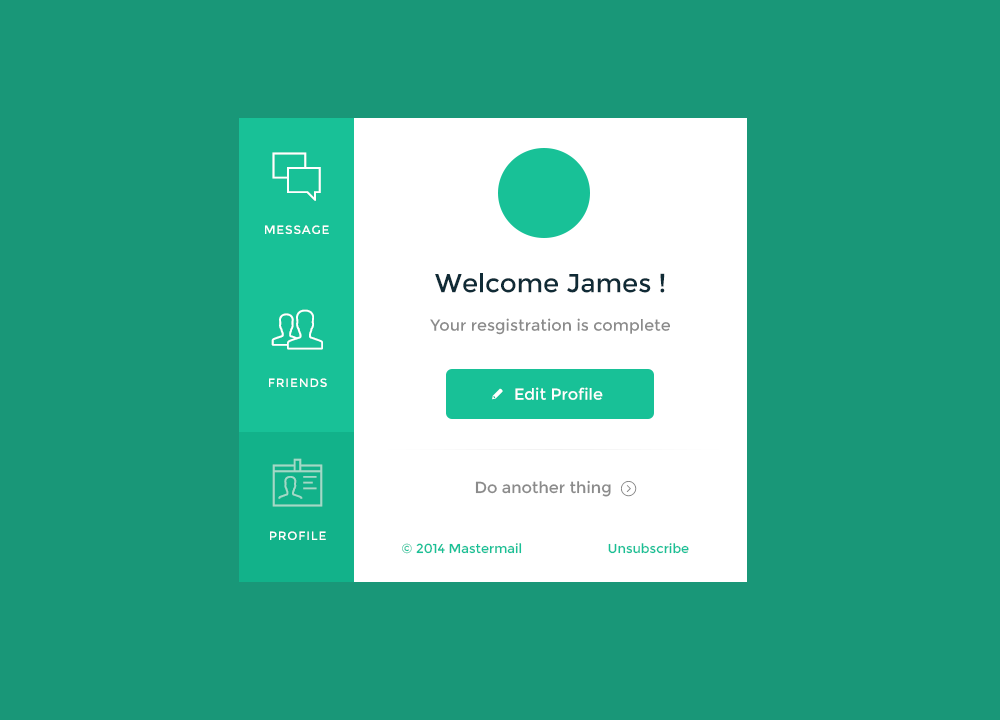
<style>
.page{position:relative;width:1000px;height:720px;background:#199778}
.page>*{position:absolute;margin:0}
.t1{font:12px "Montserrat-Regular";letter-spacing:0.07em;color:#ffffff;text-transform:uppercase}
.t2{font:26px "Montserrat-Regular";color:#102b36}
.t3{font:16px "Montserrat-Regular";color:#8b8b8b}
.t4{font:16px "Montserrat-Regular";color:#ffffff}
.t5{font:18px "Pe-icon-7-stroke";color:#808080}
.t6{font:13px "Montserrat-Regular";color:#18c197}
</style>
<div class="page">
<p class="t1" style="left:265px;top:225px;width:64px;height:9px">Message</p>
<p class="t2" style="left:435px;top:273px;width:230px;height:20px">Welcome James !</p>
<p class="t3" style="left:430px;top:318px;width:240px;height:17px">Your resgistration is complete</p>
<p class="t1" style="left:269px;top:378px;width:58px;height:9px">Friends</p>
<p class="t4" style="left:515px;top:387px;width:88px;height:13px">Edit Profile</p>
<p class="t3" style="left:475px;top:480px;width:136px;height:17px"><span class="t5"> </span>Do another thing</p>
<p class="t1" style="left:270px;top:531px;width:56px;height:9px">PROFILE</p>
<p class="t6" style="left:402px;top:543px;width:287px;height:11px">© 2014 Mastermail                        Unsubscribe</p>
</div>
